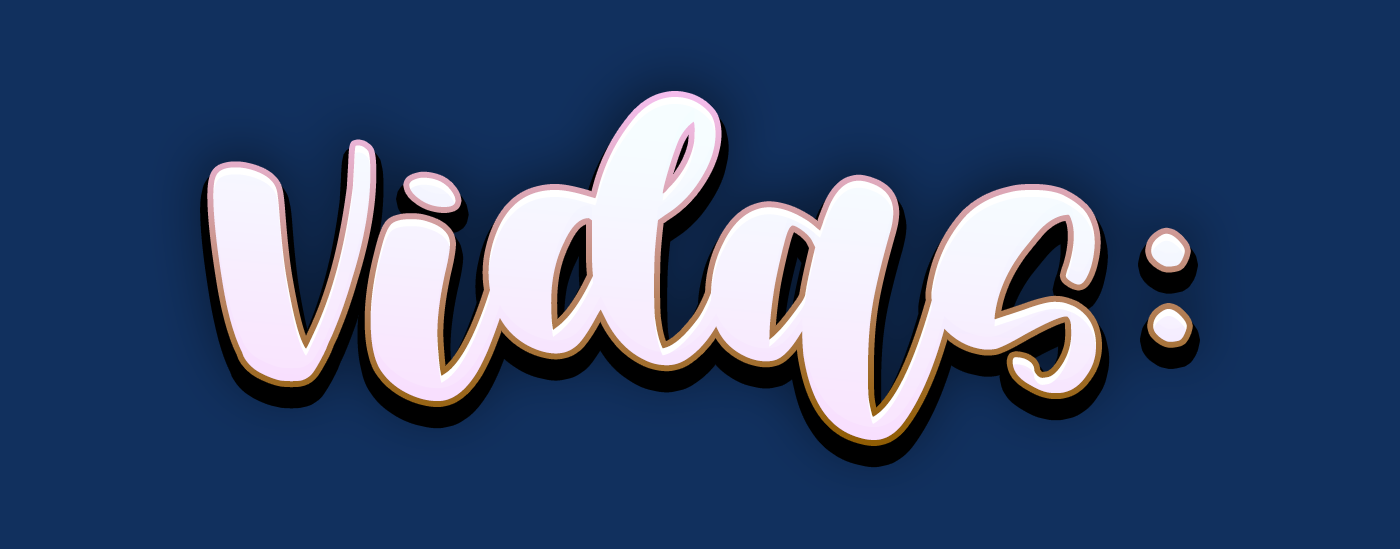
<style>
.page{position:relative;width:1400px;height:549px;background:#11305e}
.page>*{position:absolute;margin:0}
.t1{font:340px "MuthiaraDemoVersion";letter-spacing:-0.01em;color:#ffffff}
</style>
<div class="page">
<p class="t1" style="left:213px;top:97px;width:974px;height:343px">vidas:</p>
</div>
